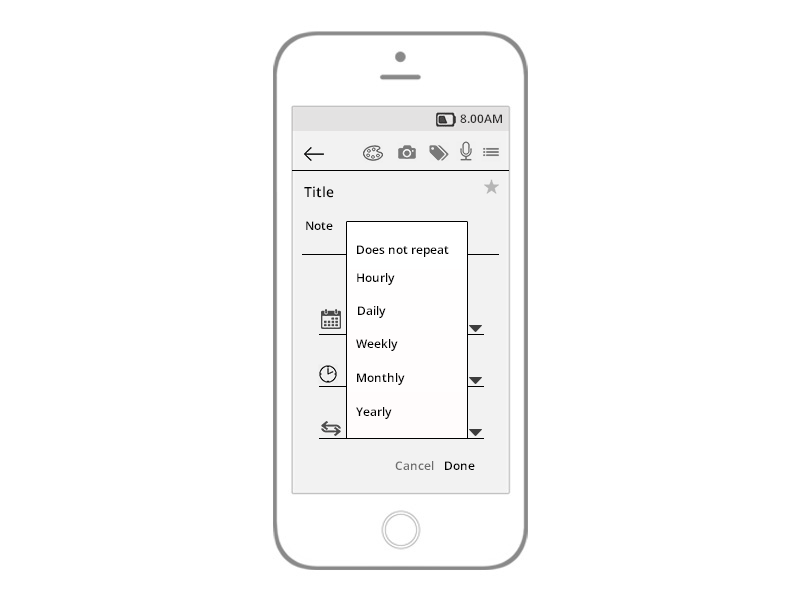
<style>
.page{position:relative;width:800px;height:600px;background:#ffffff}
.page>*{position:absolute;margin:0}
.t1{font:12px "OpenSans-Semibold";color:#2e2d2d}
.t2{font:14px "OpenSans-Semibold";color:#000000}
.t3{font:12px "OpenSans-Semibold";color:#000000}
.t4{font:12px "OpenSans-Semibold";color:#6d6d6d}
</style>
<div class="page">
<p class="t1" style="left:460px;top:114px;width:42px;height:9px">8.00AM</p>
<p class="t2" style="left:304px;top:186px;width:30px;height:12px">Title</p>
<p class="t3" style="left:306px;top:221px;width:27px;height:9px">Note</p>
<p class="t3" style="left:357px;top:245px;width:92px;height:12px">Does not repeat</p>
<p class="t3" style="left:357px;top:273px;width:38px;height:12px">Hourly</p>
<p class="t3" style="left:358px;top:306px;width:28px;height:12px">Daily</p>
<p class="t3" style="left:356px;top:339px;width:42px;height:12px">Weekly</p>
<p class="t3" style="left:357px;top:373px;width:48px;height:12px">Monthly</p>
<p class="t3" style="left:356px;top:407px;width:36px;height:12px">Yearly</p>
<p class="t4" style="left:395px;top:461px;width:39px;height:9px">Cancel</p>
<p class="t3" style="left:445px;top:461px;width:30px;height:9px">Done</p>
</div>
